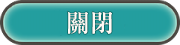
<style>
.page{position:relative;width:180px;height:45px;background:#239e9f}
.page>*{position:absolute;margin:0}
.t1{font:24px "RyuminPr6N-Bold";color:#fff9f4}
</style>
<div class="page">
<p class="t1" style="left:67px;top:11px;width:45px;height:23px">關閉</p>
</div>
